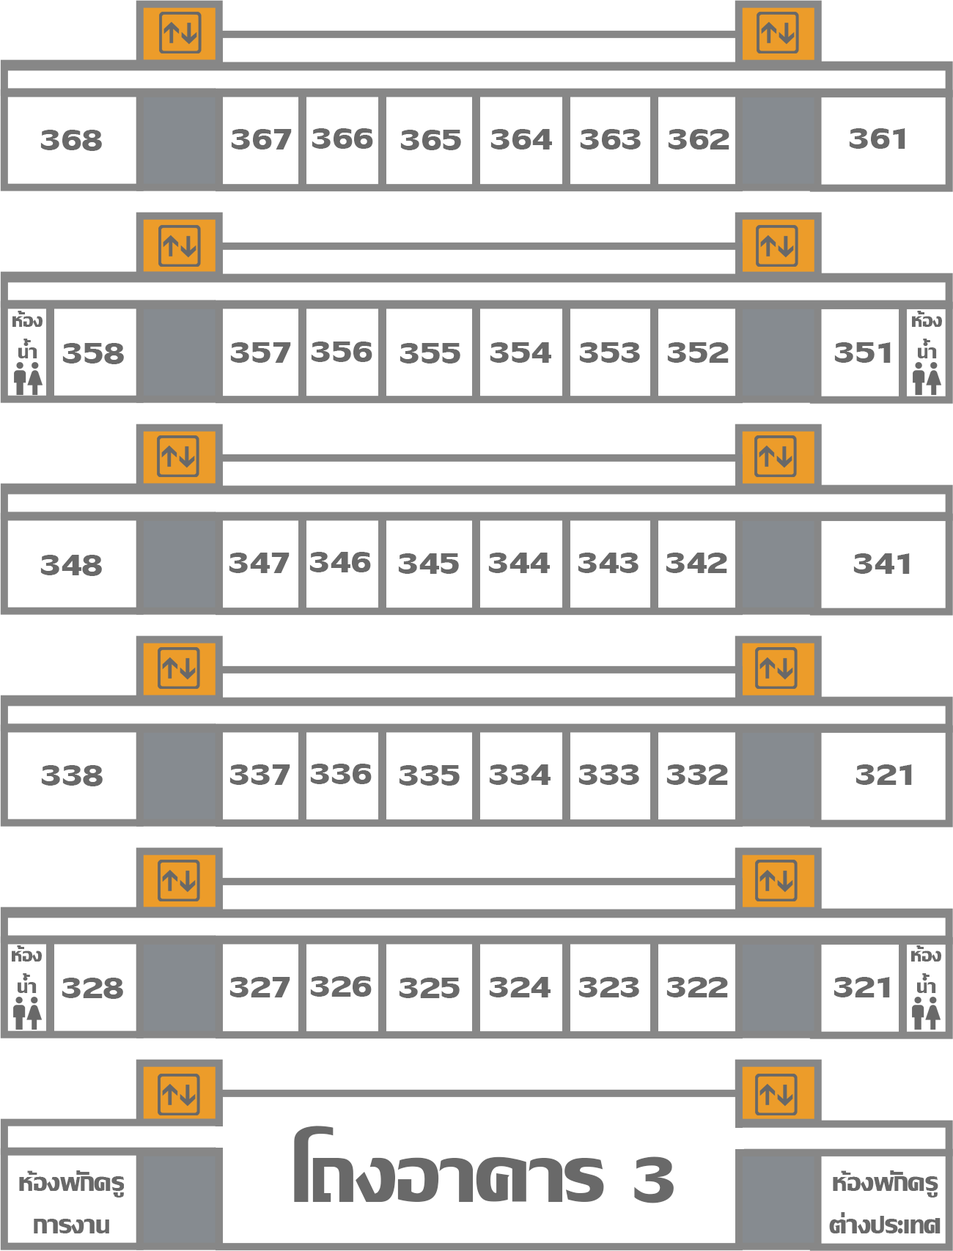
<style>
.page{position:relative;width:953px;height:1251px;background:#ffffff}
.page>*{position:absolute;margin:0}
.t1{font:44px "LilyUPCBold";color:#696969}
.t2{font:26.4px "LilyUPCBold";color:#696969}
.t3{font:110px "LilyUPCBold";color:#696969}
.t4{font:35.2px "LilyUPCBold";color:#696969}
</style>
<div class="page">
<p class="t1" style="left:40px;top:130px;width:62px;height:21px">368</p>
<p class="t1" style="left:231px;top:129px;width:61px;height:21px">367</p>
<p class="t1" style="left:312px;top:128px;width:61px;height:21px">366</p>
<p class="t1" style="left:400px;top:130px;width:61px;height:20px">365</p>
<p class="t1" style="left:490px;top:129px;width:62px;height:21px">364</p>
<p class="t1" style="left:580px;top:129px;width:61px;height:21px">363</p>
<p class="t1" style="left:668px;top:129px;width:61px;height:21px">362</p>
<p class="t1" style="left:849px;top:128px;width:56px;height:21px">361</p>
<p class="t2" style="left:12px;top:311px;width:31px;height:47px;text-align:center">ห้อง<br>น้ำ</p>
<p class="t2" style="left:912px;top:311px;width:30px;height:47px;text-align:center">ห้อง<br>น้ำ</p>
<p class="t1" style="left:311px;top:342px;width:61px;height:20px">356</p>
<p class="t1" style="left:62px;top:343px;width:62px;height:21px">358</p>
<p class="t1" style="left:230px;top:342px;width:61px;height:21px">357</p>
<p class="t1" style="left:400px;top:343px;width:60px;height:21px">355</p>
<p class="t1" style="left:490px;top:342px;width:61px;height:21px">354</p>
<p class="t1" style="left:579px;top:342px;width:61px;height:21px">353</p>
<p class="t1" style="left:667px;top:342px;width:62px;height:21px">352</p>
<p class="t1" style="left:834px;top:342px;width:57px;height:21px">351</p>
<p class="t1" style="left:40px;top:555px;width:62px;height:21px">348</p>
<p class="t1" style="left:229px;top:553px;width:61px;height:20px">347</p>
<p class="t1" style="left:309px;top:552px;width:62px;height:21px">346</p>
<p class="t1" style="left:398px;top:553px;width:61px;height:21px">345</p>
<p class="t1" style="left:488px;top:553px;width:62px;height:20px">344</p>
<p class="t1" style="left:578px;top:553px;width:60px;height:20px">343</p>
<p class="t1" style="left:666px;top:553px;width:61px;height:20px">342</p>
<p class="t1" style="left:853px;top:553px;width:57px;height:21px">341</p>
<p class="t1" style="left:41px;top:765px;width:62px;height:22px">338</p>
<p class="t1" style="left:229px;top:765px;width:61px;height:20px">337</p>
<p class="t1" style="left:310px;top:764px;width:62px;height:20px">336</p>
<p class="t1" style="left:399px;top:765px;width:61px;height:21px">335</p>
<p class="t1" style="left:489px;top:765px;width:62px;height:20px">334</p>
<p class="t1" style="left:578px;top:765px;width:61px;height:20px">333</p>
<p class="t1" style="left:666px;top:765px;width:62px;height:20px">332</p>
<p class="t1" style="left:855px;top:765px;width:57px;height:20px">321</p>
<p class="t2" style="left:12px;top:946px;width:30px;height:47px;text-align:center">ห้อง<br>น้ำ</p>
<p class="t2" style="left:911px;top:946px;width:30px;height:47px;text-align:center">ห้อง<br>น้ำ</p>
<p class="t1" style="left:62px;top:978px;width:61px;height:21px">328</p>
<p class="t1" style="left:229px;top:977px;width:61px;height:21px">327</p>
<p class="t1" style="left:310px;top:976px;width:62px;height:21px">326</p>
<p class="t1" style="left:399px;top:978px;width:61px;height:20px">325</p>
<p class="t1" style="left:489px;top:977px;width:62px;height:21px">324</p>
<p class="t1" style="left:578px;top:977px;width:61px;height:21px">323</p>
<p class="t1" style="left:666px;top:977px;width:62px;height:21px">322</p>
<p class="t1" style="left:833px;top:977px;width:57px;height:21px">321</p>
<p class="t3" style="left:294px;top:1126px;width:380px;height:78px">โถงอาคาร 3</p>
<p class="t4" style="left:19px;top:1171px;width:105px;height:63px;text-align:center">ห้องพักครู<br>การงาน</p>
<p class="t4" style="left:829px;top:1171px;width:111px;height:63px;text-align:center">ห้องพักครู<br>ต่างประเทศ</p>
</div>
